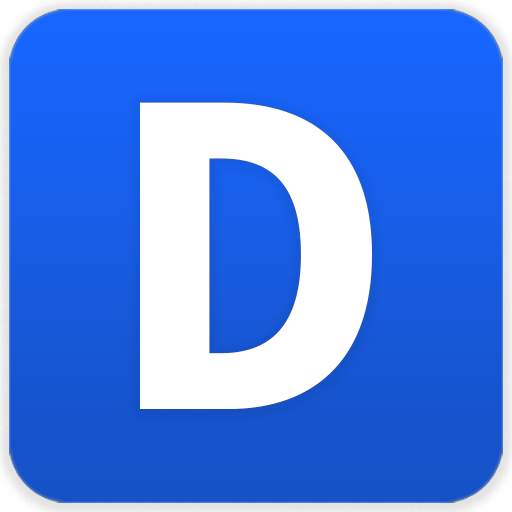
<style>
.page{position:relative;width:512px;height:512px}
.page>*{position:absolute;margin:0}
.t1{font:470px "SourceCodePro-Bold";color:#ffffff}
</style>
<div class="page">
<p class="t1" style="left:140px;top:102px;width:232px;height:307px">D</p>
</div>
